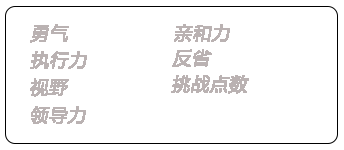
<style>
.page{position:relative;width:344px;height:150px;background:#ffffff}
.page>*{position:absolute;margin:0}
.t1{font:18px "MicrosoftYaHei";color:#bab2b2;font-weight:bold;font-style:italic}
</style>
<div class="page">
<p class="t1" style="left:30px;top:24px;width:39px;height:19px">勇气</p>
<p class="t1" style="left:174px;top:24px;width:56px;height:18px">亲和力</p>
<p class="t1" style="left:30px;top:51px;width:57px;height:18px">执行力</p>
<p class="t1" style="left:172px;top:49px;width:40px;height:18px">反省</p>
<p class="t1" style="left:30px;top:78px;width:39px;height:19px">视野</p>
<p class="t1" style="left:171px;top:75px;width:78px;height:19px">挑战点数</p>
<p class="t1" style="left:31px;top:106px;width:55px;height:18px">领导力</p>
</div>
